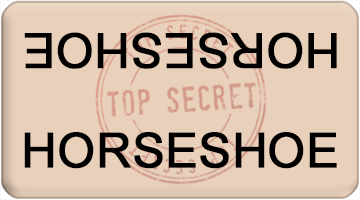
<style>
.page{position:relative;width:360px;height:200px;background:#e8d0bb}
.page>*{position:absolute;margin:0}
.t1{font:48px "ArialMT";color:#000000;font-weight:bold}
</style>
<div class="page">
<p class="t1" style="left:24px;top:32px;width:313px;height:37px;rotate:180deg">HORSESHOE</p>
<p class="t1" style="left:24px;top:132px;width:313px;height:37px">HORSESHOE</p>
</div>
